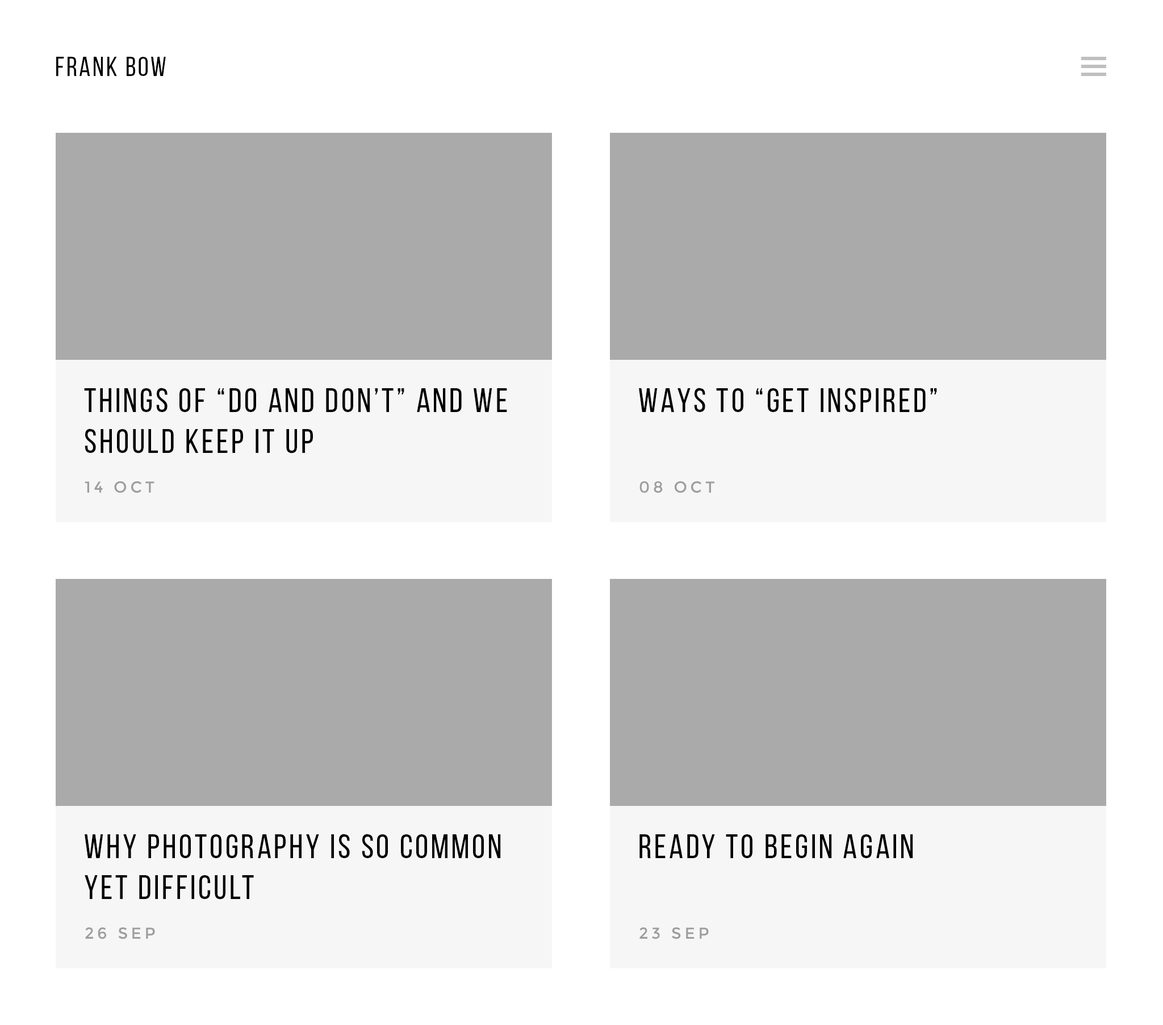
<style>
.page{position:relative;width:1163px;height:1025px;background:#aaaaaa}
.page>*{position:absolute;margin:0}
.t1{font:27.3px "BebasNeueRegular";letter-spacing:0.075em;color:#000000;text-transform:uppercase}
.t2{font:34.1px/40.9px "BebasNeueRegular";letter-spacing:0.075em;color:#000000}
.t3{font:34.1px "BebasNeueRegular";letter-spacing:0.075em;color:#000000}
.t4{font:15.9px "Montserrat-Regular";letter-spacing:0.2em;color:#9d9d9d;text-transform:uppercase}
</style>
<div class="page">
<p class="t1" style="left:56px;top:57px;width:110px;height:19px">FRANK BOW</p>
<p class="t2" style="left:84px;top:388px;width:423px;height:66px">THINGS OF “DO AND DON’T” and WE SHOULD KEEP IT UP</p>
<p class="t3" style="left:639px;top:388px;width:298px;height:24px">WAYS TO “GET INSPIRED”</p>
<p class="t4" style="left:85px;top:481px;width:69px;height:12px">14 OCT</p>
<p class="t4" style="left:639px;top:481px;width:75px;height:12px">08 OCT</p>
<p class="t2" style="left:85px;top:834px;width:416px;height:66px">WHY PHOTOGRAPHY IS SO COMMON YET DIFFICULT</p>
<p class="t3" style="left:639px;top:835px;width:274px;height:24px">READY TO BEGIN AGAIN</p>
<p class="t4" style="left:85px;top:928px;width:70px;height:12px">26 SEP</p>
<p class="t4" style="left:639px;top:928px;width:70px;height:12px">23 SEP</p>
</div>
